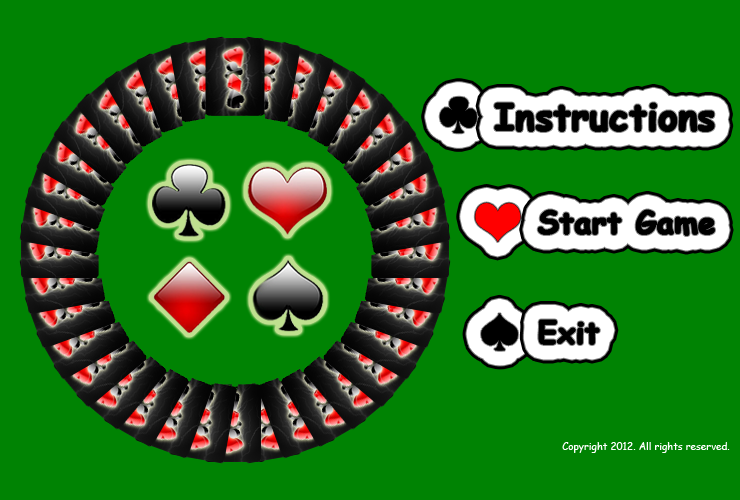
<style>
.page{position:relative;width:740px;height:500px;background:#008303}
.page>*{position:absolute;margin:0}
.t1{font:36px "ComicSansMS-Bold";color:#000000;font-weight:bold}
.t2{font:30px "ComicSansMS-Bold";color:#000000;font-weight:bold}
.t3{font:10px "ComicSansMS";color:#ffffff}
</style>
<div class="page">
<p class="t1" style="left:494px;top:103px;width:221px;height:29px">Instructions</p>
<p class="t2" style="left:538px;top:210px;width:177px;height:26px">Start Game</p>
<p class="t2" style="left:538px;top:320px;width:62px;height:25px">Exit</p>
<p class="t3" style="left:562px;top:442px;width:168px;height:11px">Copyright 2012. All rights reserved.</p>
</div>
